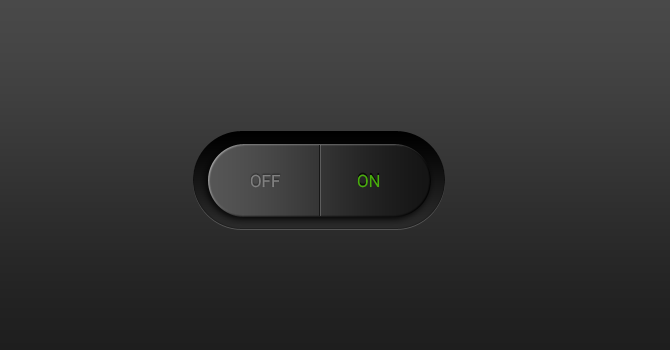
<style>
.page{position:relative;width:670px;height:350px}
.page>*{position:absolute;margin:0}
.t1{font:17px "Roboto-Regular";color:#818181}
.t2{font:17px "Roboto-Regular";color:#49ae0c}
</style>
<div class="page">
<p class="t1" style="left:250px;top:174px;width:31px;height:14px">OFF</p>
<p class="t2" style="left:357px;top:174px;width:23px;height:14px">ON</p>
</div>
